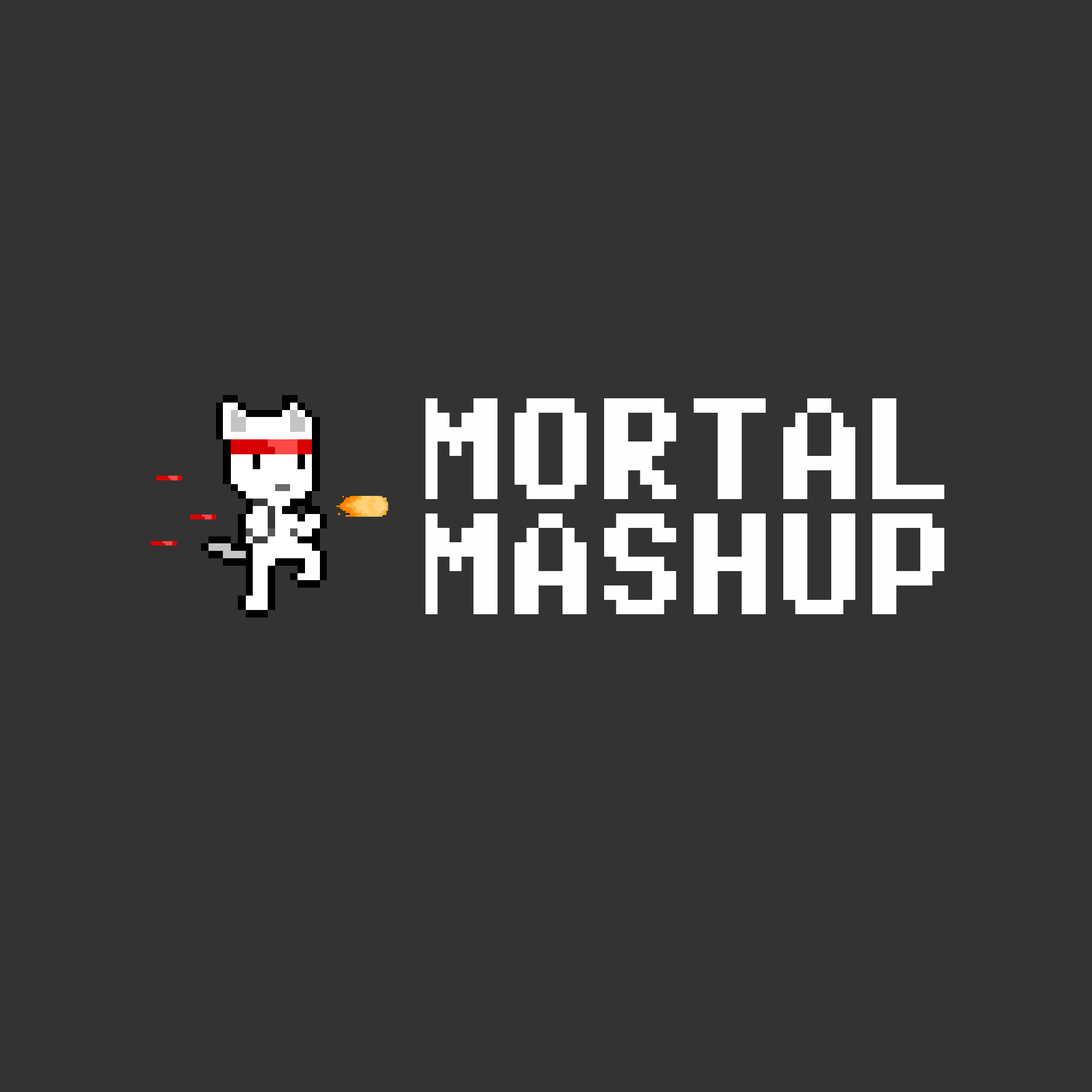
<style>
.page{position:relative;width:1092px;height:1092px;background:#333333}
.page>*{position:absolute;margin:0}
.t1{font:115.2px "Super-Mario-World";letter-spacing:0.02em;color:#fefefe;text-transform:uppercase;scale:0.83 1}
</style>
<div class="page">
<p class="t1" style="left:425px;top:398px;width:519px;height:216px;text-align:center">MORTAL<br>MASHUP</p>
</div>
